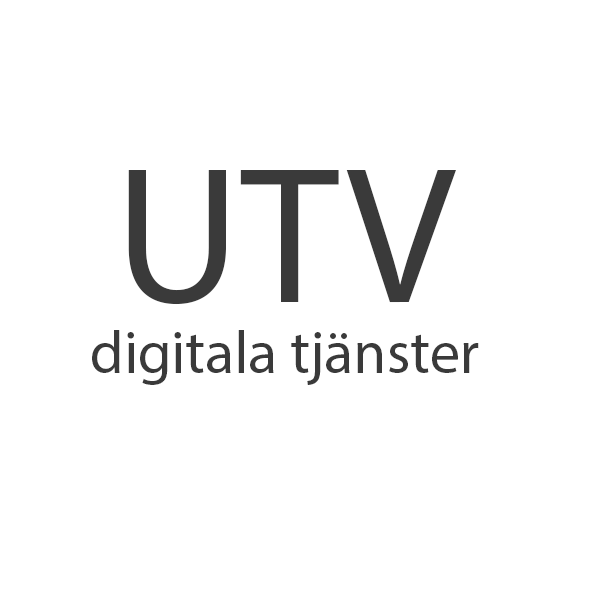
<style>
.page{position:relative;width:600px;height:600px;background:#ffffff}
.page>*{position:absolute;margin:0}
.t1{font:60px "MyriadPro-Regular";color:#3a3a3a}
.t2{font:196px "MyriadPro-Regular";color:#3a3a3a}
</style>
<div class="page">
<p class="t1" style="left:92px;top:170px;width:387px;height:215px;text-align:center"><span class="t2">UTV<br></span>digitala tjänster</p>
</div>
